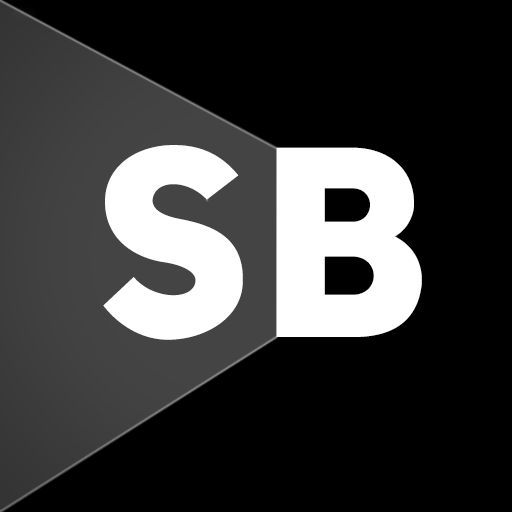
<style>
.page{position:relative;width:512px;height:512px;background:#000000}
.page>*{position:absolute;margin:0}
.t1{font:267.1px "UniSansHeavyCAPS";letter-spacing:0.05em;color:#ffffff}
</style>
<div class="page">
<p class="t1" style="left:103px;top:145px;width:319px;height:195px">SB</p>
</div>
